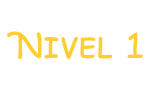
<style>
.page{position:relative;width:150px;height:90px;background:#ffffff}
.page>*{position:absolute;margin:0}
.t1{font:33.3px "ComicSansMS";letter-spacing:0.02em;color:#ffce33}
</style>
<div class="page">
<p class="t1" style="left:7px;top:31px;width:136px;height:29px">Nivel 1</p>
</div>
